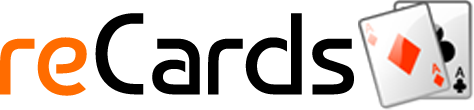
<style>
.page{position:relative;width:474px;height:110px;background:#ffffff}
.page>*{position:absolute;margin:0}
.t1{font:115.6px "Baumans-Regular";letter-spacing:-0.02em;color:#000000}
.t2{font:115.6px "Baumans-Regular";letter-spacing:-0.02em;color:#ff6c00}
</style>
<div class="page">
<p class="t1" style="left:0px;top:13px;width:354px;height:83px"><span class="t2">re</span>Cards</p>
</div>
